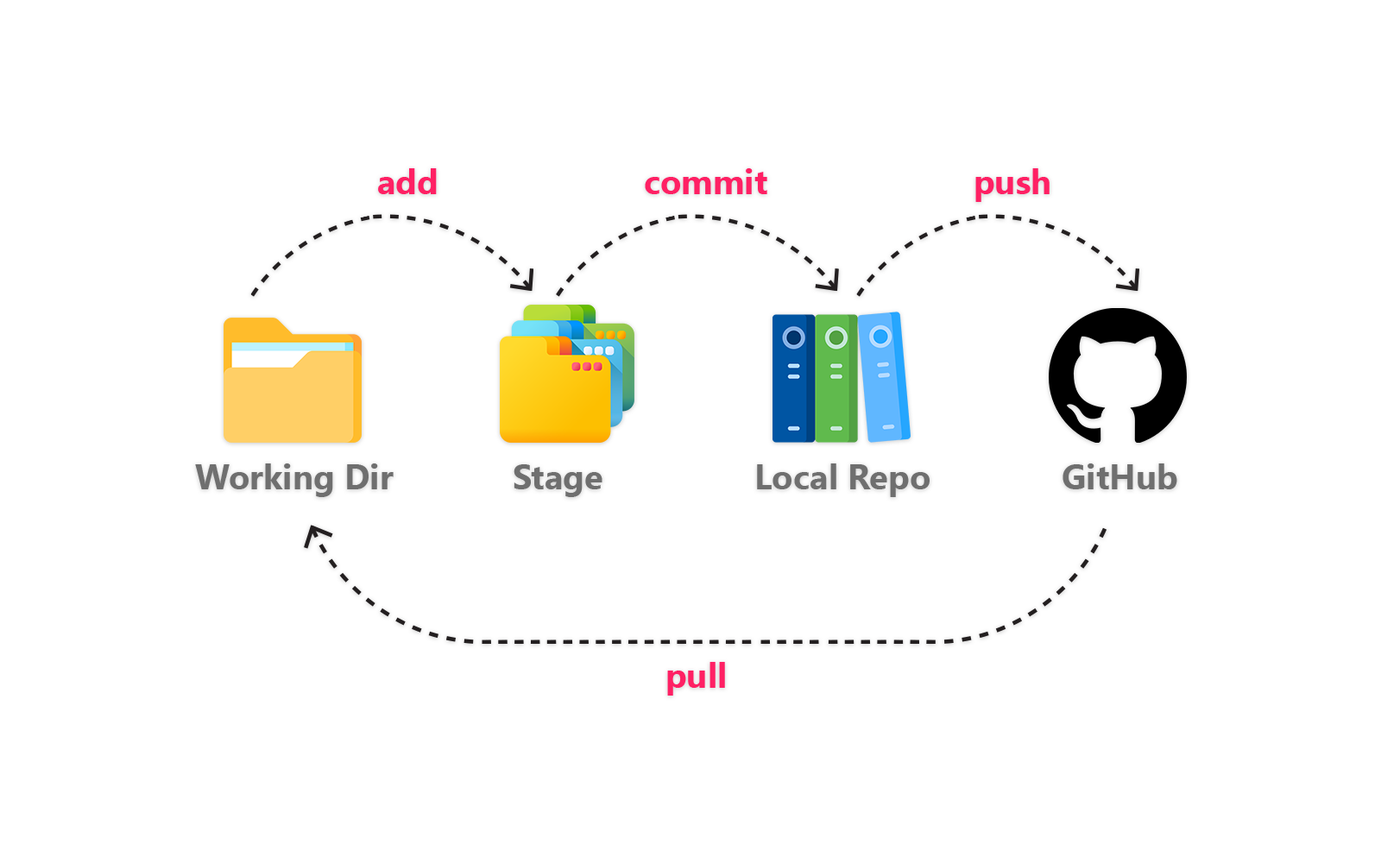
<style>
.page{position:relative;width:1381px;height:863px;background:#ffffff}
.page>*{position:absolute;margin:0}
.t1{font:34.5px "SegoeUI-Bold";color:#ff2064}
.t2{font:34.5px "SegoeUI-Bold";color:#6f6f6f}
</style>
<div class="page">
<p class="t1" style="left:378px;top:168px;width:59px;height:26px">add</p>
<p class="t1" style="left:645px;top:168px;width:122px;height:26px">commit</p>
<p class="t1" style="left:976px;top:168px;width:74px;height:34px">push</p>
<p class="t2" style="left:195px;top:464px;width:199px;height:33px">Working Dir</p>
<p class="t2" style="left:514px;top:464px;width:89px;height:33px">Stage</p>
<p class="t2" style="left:757px;top:464px;width:173px;height:33px">Local Repo</p>
<p class="t2" style="left:1063px;top:464px;width:115px;height:25px">GitHub</p>
<p class="t1" style="left:667px;top:662px;width:58px;height:34px">pull</p>
</div>
